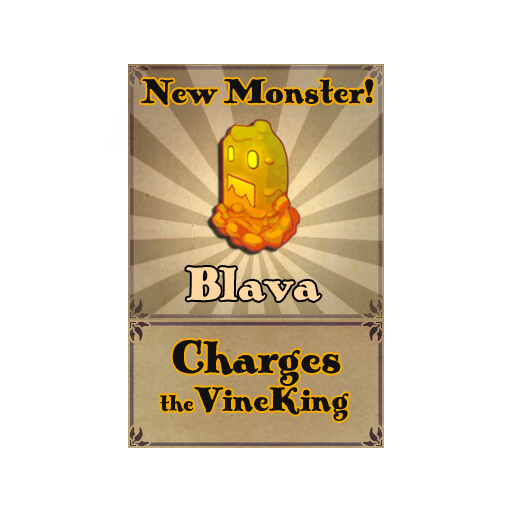
<style>
.page{position:relative;width:512px;height:512px;background:#ffffff}
.page>*{position:absolute;margin:0}
.t1{font:36px "PickworthOldStylePro";color:#101010}
.t2{font:50px "PickworthOldStylePro";color:#ffd6a0}
.t3{font:36px/38px "PickworthOldStylePro";letter-spacing:-0.005em;color:#101010}
.t4{font:30px "PickworthOldStylePro";color:#101010}
.t5{font:48px/38px "PickworthOldStylePro";letter-spacing:-0.005em;color:#101010}
.t6{font:24px/38px "PickworthOldStylePro";letter-spacing:-0.005em;color:#101010}
</style>
<div class="page">
<p class="t1" style="left:141px;top:78px;width:233px;height:27px">New Monster!</p>
<p class="t2" style="left:186px;top:267px;width:135px;height:34px">Blava</p>
<p class="t3" style="left:160px;top:339px;width:189px;height:82px"><span class="t4">   </span><span class="t5">  Charges<br> </span><span class="t6">the</span>VineKing</p>
</div>
